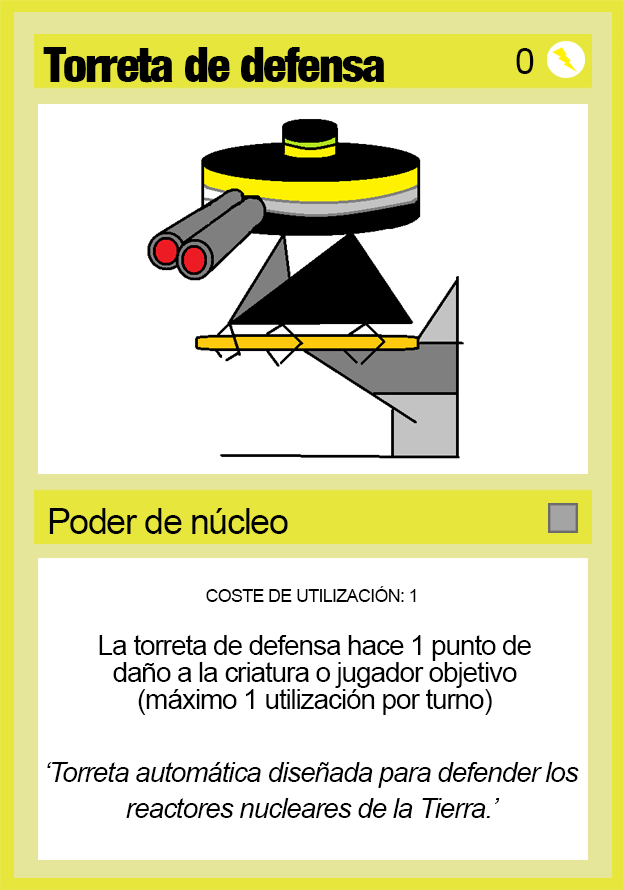
<style>
.page{position:relative;width:624px;height:890px;background:#ffffff}
.page>*{position:absolute;margin:0}
.t1{font:48px "Harvest";letter-spacing:-0.04em;color:#000000}
.t2{font:36px "ArialMT";letter-spacing:-0.04em;color:#000000}
.t3{font:18px "ArialMT";letter-spacing:-0.04em;color:#000000}
.t4{font:28px/27px "ArialMT";letter-spacing:-0.04em;color:#000000}
.t5{font:28px/36px "Arial-ItalicMT";letter-spacing:-0.04em;color:#000000}
</style>
<div class="page">
<p class="t1" style="left:43px;top:47px;width:342px;height:36px">Torreta de defensa</p>
<p class="t2" style="left:516px;top:48px;width:18px;height:26px">0</p>
<p class="t2" style="left:49px;top:508px;width:239px;height:26px">Poder de núcleo</p>
<p class="t3" style="left:206px;top:586px;width:210px;height:16px">COSTE DE UTILIZACIÓN: 1</p>
<p class="t4" style="left:99px;top:635px;width:432px;height:80px;text-align:center">La torreta de defensa hace 1 punto de daño a la criatura o jugador objetivo (máximo 1 utilización por turno)</p>
<p class="t5" style="left:47px;top:762px;width:532px;height:56px;text-align:center">‘Torreta automática diseñada para defender los reactores nucleares de la Tierra.’</p>
</div>
